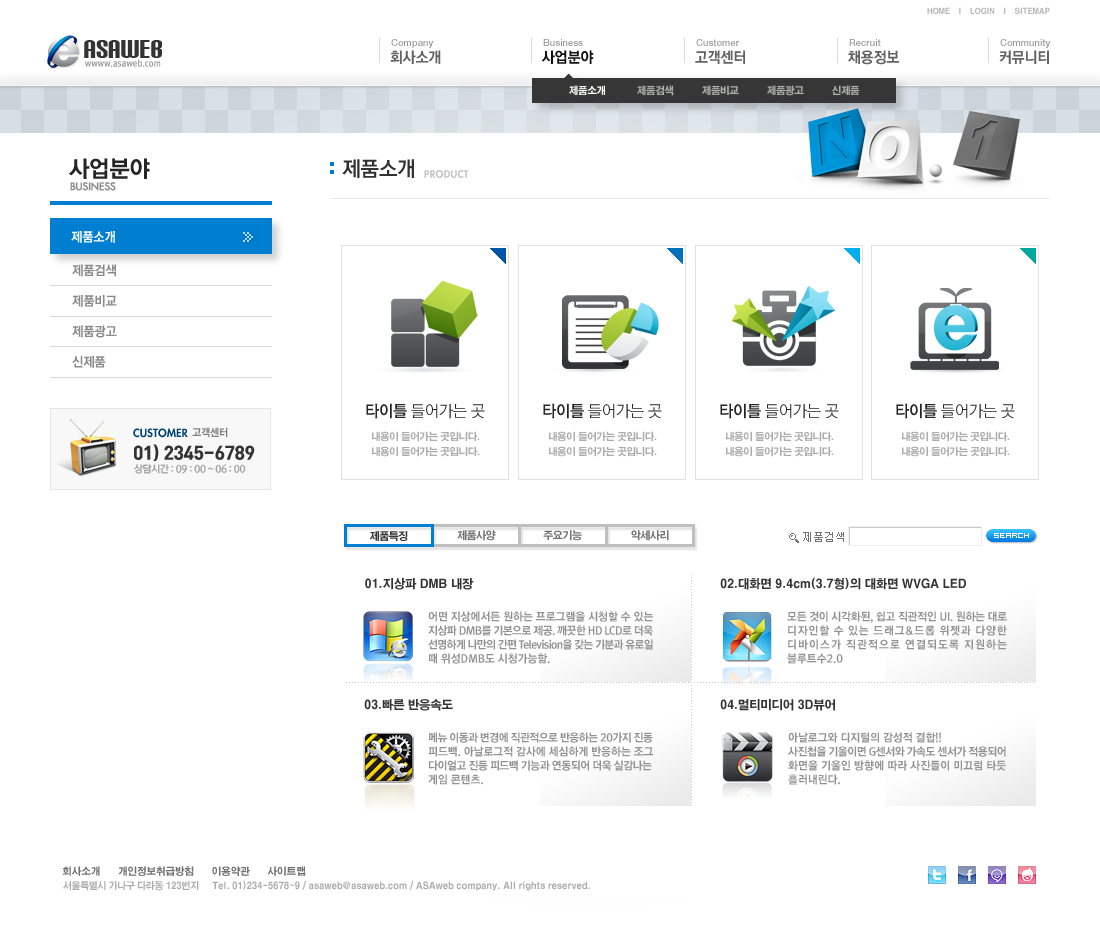
<style>
.page{position:relative;width:1100px;height:950px;background:#ffffff}
.page>*{position:absolute;margin:0}
.t1{font:8px "H2gtrE";letter-spacing:-0.05em;color:#b7b7b7;text-transform:uppercase;scale:0.96 1}
.t2{font:30px "CarbonBlock";color:#333333}
.t3{font:9.5px "HelveticaNeue-Medium";color:#959595}
.t4{font:15px "RixGoEB";letter-spacing:-0.025em;color:#636363}
.t5{font:15px "RixGoEB";letter-spacing:-0.025em;color:#111111}
.t6{font:9px "RixGoM";letter-spacing:0.025em;color:#999999;scale:0.9 1}
.t7{font:10px "H2gtrE";letter-spacing:-0.04em;color:#ffffff;text-transform:uppercase;scale:0.96 1}
.t8{font:10px "H2gtrE";letter-spacing:-0.04em;color:#afafaf;text-transform:uppercase;scale:0.96 1}
.t9{font:23px "RixGoEB";letter-spacing:-0.025em;color:#252525}
.t10{font:21px "RixGoB";letter-spacing:-0.025em;color:#313131;text-transform:uppercase}
.t11{font:10px "SJÁ¤B";letter-spacing:0.025em;color:#c2c2c2;text-transform:uppercase}
.t12{font:10px "SJÁ¤R";color:#898989;text-transform:uppercase;font-weight:bold}
.t13{font:13px "RixGoEB";letter-spacing:-0.025em;color:#ffffff;text-transform:uppercase}
.t14{font:13px/30.5px "RixGoEB";letter-spacing:-0.025em;color:#898989;text-transform:uppercase}
.t15{font:16px "RixGoL";letter-spacing:-0.025em;color:#252525;text-transform:uppercase}
.t16{font:16px "RixGoB";letter-spacing:-0.025em;color:#252525;text-transform:uppercase}
.t17{font:11px "SJÁ¤B";color:#004272;text-transform:uppercase}
.t18{font:10px "H2gtrE";letter-spacing:-0.035em;color:#7d7d7d;scale:0.93 1}
.t19{font:10px/15px "H2gtrE";letter-spacing:-0.05em;color:#acacac;text-transform:uppercase;scale:0.96 1}
.t20{font:17.5px "RixHeadEB";letter-spacing:-0.025em;color:#333333}
.t21{font:10px "RixGoB";letter-spacing:-0.04em;color:#a1a1a1}
.t22{font:10.5px "H2gtrE";letter-spacing:-0.05em;color:#363636;text-transform:uppercase;scale:0.96 1}
.t23{font:10.5px "H2gtrE";letter-spacing:-0.05em;color:#727272;text-transform:uppercase;scale:0.96 1}
.t24{font:11px "Dotum";color:#727272}
.t25{font:12px "H2gtrE";letter-spacing:-0.025em;color:#333333;scale:0.96 1}
.t26{font:11px/14px "RixGoEB";letter-spacing:-0.055em;color:#929292}
.t27{font:11px/14px "RixGoEB";color:#929292}
.t28{font:11px/14px "RixGoEB";letter-spacing:-0.045em;color:#929292}
.t29{font:11px/14px "RixGoEB";letter-spacing:-0.017em;color:#929292}
.t30{font:11px/14px "RixGoEB";letter-spacing:0.075em;color:#929292}
.t31{font:11px/14px "RixGoEB";letter-spacing:0.1em;color:#929292}
.t32{font:11px/14px "RixGoEB";letter-spacing:-0.038em;color:#929292}
.t33{font:11px/14px "RixGoEB";letter-spacing:-0.04em;color:#929292}
.t34{font:11px/14px "RixGoEB";letter-spacing:0.01em;color:#929292}
.t35{font:10px "H2gtrE";letter-spacing:-0.05em;color:#707070;scale:0.95 1}
.t36{font:9.6px "H2gtrE";letter-spacing:-0.035em;color:#acacac;scale:0.93 1}
</style>
<div class="page">
<p class="t1" style="left:927px;top:7px;width:123px;height:7px">home    i    login    i    sitemap</p>
<p class="t2" style="left:84px;top:40px;width:78px;height:18px">AsaWeb</p>
<p class="t3" style="left:391px;top:39px;width:43px;height:9px">Company</p>
<p class="t3" style="left:543px;top:39px;width:40px;height:7px">Business</p>
<p class="t3" style="left:696px;top:39px;width:43px;height:7px">Customer</p>
<p class="t3" style="left:849px;top:39px;width:32px;height:7px">Recruit</p>
<p class="t3" style="left:1000px;top:39px;width:51px;height:9px">Community</p>
<p class="t4" style="left:390px;top:50px;width:51px;height:14px">회사소개</p>
<p class="t5" style="left:541px;top:50px;width:53px;height:14px">사업분야</p>
<p class="t4" style="left:695px;top:50px;width:50px;height:14px">고객센터</p>
<p class="t4" style="left:848px;top:50px;width:51px;height:15px">채용정보</p>
<p class="t4" style="left:999px;top:50px;width:50px;height:14px">커뮤니티</p>
<p class="t6" style="left:85px;top:59px;width:76px;height:8px">wwww.asaweb.com</p>
<p class="t7" style="left:569px;top:85px;width:36px;height:10px">제품소개</p>
<p class="t8" style="left:637px;top:85px;width:223px;height:11px">제품검색          제품비교          제품광고          신제품</p>
<p class="t9" style="left:69px;top:158px;width:81px;height:21px">사업분야</p>
<p class="t10" style="left:342px;top:159px;width:72px;height:19px">제품소개</p>
<p class="t11" style="left:424px;top:170px;width:45px;height:8px">product</p>
<p class="t12" style="left:70px;top:182px;width:46px;height:9px">business</p>
<p class="t13" style="left:71px;top:231px;width:44px;height:12px">제품소개</p>
<p class="t14" style="left:72px;top:264px;width:45px;height:104px">제품검색<br>제품비교<br>제품광고<br>신제품</p>
<p class="t15" style="left:366px;top:403px;width:119px;height:16px"><span class="t16">타이틀</span> 들어가는 곳</p>
<p class="t15" style="left:543px;top:403px;width:119px;height:16px"><span class="t16">타이틀</span> 들어가는 곳</p>
<p class="t15" style="left:720px;top:403px;width:119px;height:16px"><span class="t16">타이틀</span> 들어가는 곳</p>
<p class="t15" style="left:896px;top:403px;width:119px;height:16px"><span class="t16">타이틀</span> 들어가는 곳</p>
<p class="t17" style="left:133px;top:428px;width:55px;height:10px">Customer</p>
<p class="t18" style="left:192px;top:427px;width:36px;height:11px">고객센터</p>
<p class="t19" style="left:372px;top:431px;width:108px;height:26px;text-align:justify">내용이 들어가는 곳입니다.<br>내용이 들어가는 곳입니다.</p>
<p class="t19" style="left:549px;top:431px;width:108px;height:26px;text-align:justify">내용이 들어가는 곳입니다.<br>내용이 들어가는 곳입니다.</p>
<p class="t19" style="left:726px;top:431px;width:108px;height:26px;text-align:justify">내용이 들어가는 곳입니다.<br>내용이 들어가는 곳입니다.</p>
<p class="t19" style="left:902px;top:431px;width:108px;height:26px;text-align:justify">내용이 들어가는 곳입니다.<br>내용이 들어가는 곳입니다.</p>
<p class="t20" style="left:134px;top:444px;width:121px;height:17px">01) 2345-6789</p>
<p class="t21" style="left:134px;top:464px;width:112px;height:10px">상담시간 : 09 : 00 ~ 06 : 00</p>
<p class="t22" style="left:370px;top:531px;width:38px;height:10px">제품특징</p>
<p class="t23" style="left:457px;top:530px;width:39px;height:11px">제품사양</p>
<p class="t23" style="left:543px;top:530px;width:39px;height:11px">주요기능</p>
<p class="t23" style="left:631px;top:530px;width:38px;height:11px">악세사리</p>
<p class="t24" style="left:803px;top:532px;width:41px;height:10px">제품검색</p>
<p class="t25" style="left:365px;top:578px;width:109px;height:12px">01.지상파 DMB 내장</p>
<p class="t25" style="left:720px;top:577px;width:246px;height:13px">02.대화면 9.4cm(3.7형)의 대화면 WVGA LED</p>
<p class="t26" style="left:428px;top:611px;width:225px;height:53px"><span class="t27">어떤 지상에서든 원하는 프로그램을 시청할 수 있는 <br></span><span class="t28">지상파 DMB를 기본으로 제공. 깨끗한 HD LCD로 더욱 <br></span>선명하게 나만의 간편 Television을 갖는 기분과 유로일 <br><span class="t27">때 위성DMB도 시청가능함.</span></p>
<p class="t29" style="left:787px;top:611px;width:220px;height:53px">모든 것이 시각화된, 쉽고 직관적인 UI. 원하는 대로 <br><span class="t30">디자인할 수 있는 드래그&amp;드롭 위젯과 다양한 <br></span><span class="t31">디바이스가 직관적으로 연결되도록 지원하는 <br></span><span class="t27">블루트수2.0</span></p>
<p class="t25" style="left:364px;top:699px;width:89px;height:12px">03.빠른 반응속도</p>
<p class="t25" style="left:720px;top:699px;width:116px;height:12px">04.멀티미디어 3D뷰어</p>
<p class="t28" style="left:428px;top:732px;width:225px;height:53px">메뉴 이동과 변경에 직관적으로 반응하는 20가지 진동<br><span class="t27">피드백. 아날로그적 감사에 세심하게 반응하는 조그 <br></span><span class="t32">다이얼고 진등 피드백 기능과 연동되어 더욱 실감나는<br></span><span class="t27">게임 콘텐츠.</span></p>
<p class="t33" style="left:788px;top:732px;width:218px;height:53px"><span class="t27">아날로그와 디지털의 감성적 결합!!<br></span>사진첩을 기울이면 G센서와 가속도 센서가 적용되어 <br><span class="t34">화면을 기울인 방향에 따라 사진들이 미끄럼 타듯 <br></span><span class="t27">흘러내린다.</span></p>
<p class="t35" style="left:62px;top:866px;width:244px;height:10px">회사소개       개인정보취급방침       이용약관       사이트맵</p>
<p class="t36" style="left:63px;top:880px;width:527px;height:11px">서울특별시 가나구 다라동 123번지     Tel. 01)234-5678~9 / asaweb@asaweb.com / ASAweb company. All rights reserved.</p>
</div>
